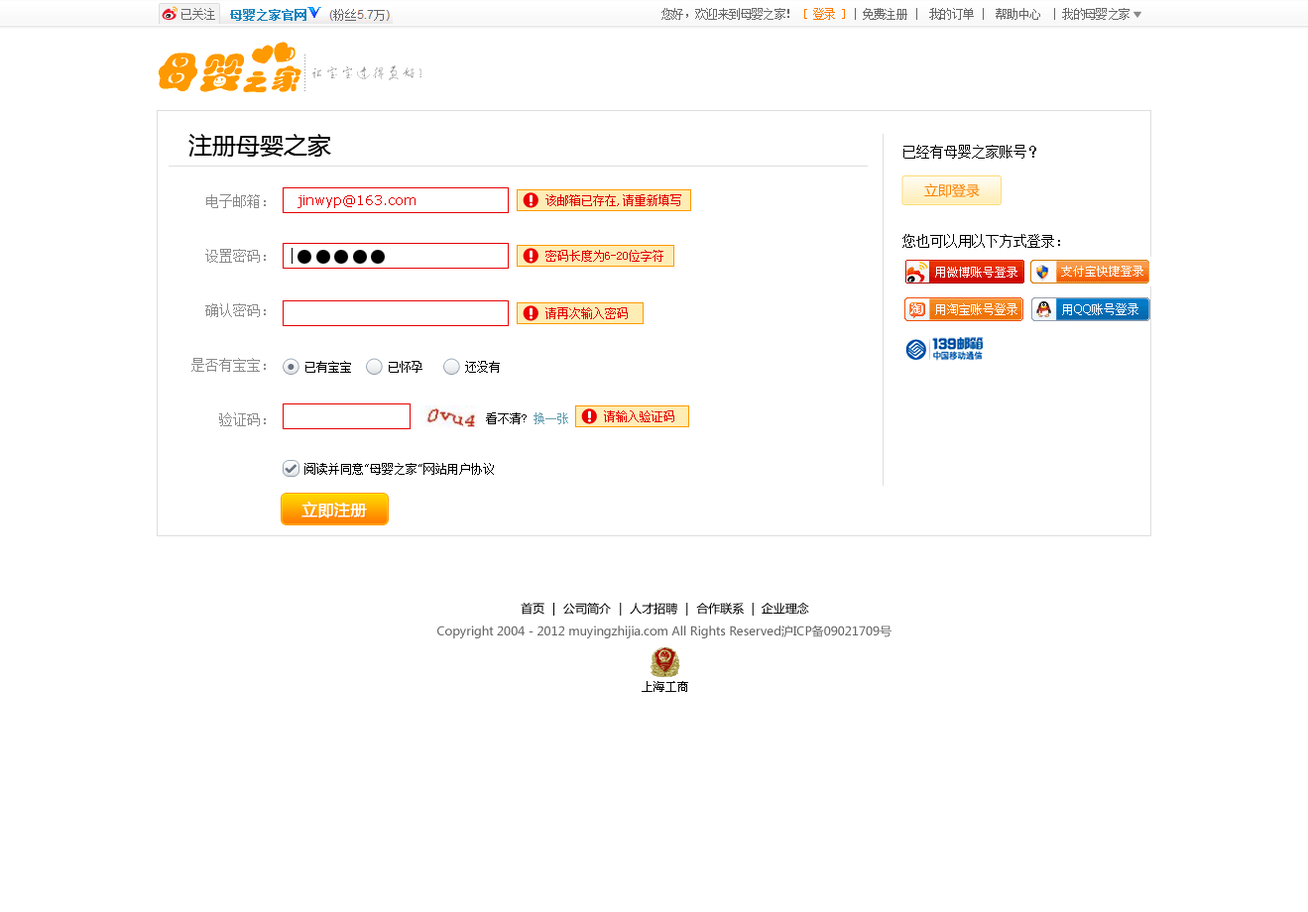
<style>
.page{position:relative;width:1308px;height:912px;background:#ffffff}
.page>*{position:absolute;margin:0}
.t1{font:11.9px "SimSun";letter-spacing:-0.05em;color:#666666}
.t2{font:11.9px "SimSun";letter-spacing:-0.05em;color:#ff7800}
.t3{font:23.8px "MicrosoftYaHei";color:#000000}
.t4{font:13.9px "SimSun";color:#000000}
.t5{font:13.9px "MicrosoftYaHei";color:#f78000}
.t6{font:13.9px/54.5px "SimSun";color:#898989}
.t7{font:13.9px/54.5px "MicrosoftYaHei";color:#898989}
.t8{font:13.9px "Verdana";color:#e60000}
.t9{font:11.9px "SimSun";color:#e60000}
.t10{font:11.9px "SimSun";color:#000000}
.t11{font:11.9px "SimSun";color:#619eb1}
.t12{font:13.9px "Pictos";color:#687280}
.t13{font:15.9px "MicrosoftYaHei";color:#ffffff;font-weight:bold}
.t14{font:11.9px "MicrosoftYaHei";color:#000000}
.t15{font:11.9px "MicrosoftYaHei";color:#666666}
</style>
<div class="page">
<p class="t1" style="left:661px;top:8px;width:468px;height:12px">您好，欢迎来到母婴之家！ <span class="t2">[ 登录 ]</span> | 免费注册 |  我的订单 |  帮助中心  | 我的母婴之家</p>
<p class="t3" style="left:188px;top:134px;width:143px;height:23px">注册母婴之家</p>
<p class="t4" style="left:903px;top:145px;width:133px;height:14px">已经有母婴之家账号？</p>
<p class="t5" style="left:924px;top:183px;width:55px;height:14px">立即登录</p>
<p class="t6" style="left:191px;top:194px;width:75px;height:232px;text-align:right"><span class="t7"><br></span>电子邮箱：<br>设置密码：<br>确认密码：<br>是否有宝宝：<br>验证码：</p>
<p class="t8" style="left:297px;top:195px;width:118px;height:13px">jinwyp@163.com</p>
<p class="t9" style="left:545px;top:194px;width:136px;height:12px">该邮箱已存在,请重新填写</p>
<p class="t4" style="left:902px;top:234px;width:158px;height:14px">您也可以用以下方式登录：</p>
<p class="t9" style="left:545px;top:250px;width:118px;height:12px">密码长度为6-20位字符</p>
<p class="t9" style="left:545px;top:307px;width:82px;height:12px">请再次输入密码</p>
<p class="t10" style="left:305px;top:361px;width:195px;height:12px">已有宝宝      已怀孕       还没有</p>
<p class="t10" style="left:486px;top:412px;width:82px;height:12px">看不清? <span class="t11">换一张</span></p>
<p class="t9" style="left:604px;top:410px;width:70px;height:12px">请输入验证码</p>
<p class="t12" style="left:285px;top:464px;width:11px;height:9px">3</p>
<p class="t10" style="left:304px;top:463px;width:190px;height:12px">阅读并同意"母婴之家"网站用户协议</p>
<p class="t13" style="left:301px;top:502px;width:66px;height:16px">立即注册</p>
<p class="t14" style="left:520px;top:603px;width:289px;height:13px">首页 ｜ 公司简介 ｜ 人才招聘 ｜ 合作联系  |  企业理念</p>
<p class="t15" style="left:437px;top:625px;width:454px;height:13px">Copyright 2004 - 2012 muyingzhijia.com All Rights Reserved沪ICP备09021709号</p>
</div>
